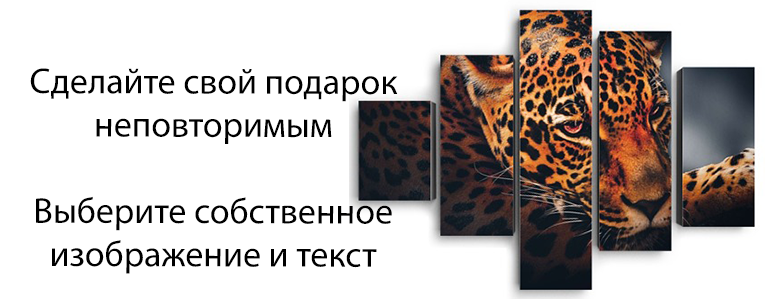
<style>
.page{position:relative;width:765px;height:300px;background:#ffffff}
.page>*{position:absolute;margin:0}
.t1{font:36px "MyriadPro-Regular";color:#000000}
</style>
<div class="page">
<p class="t1" style="left:30px;top:68px;width:368px;height:206px;text-align:center">Сделайте свой подарок<br>неповторимым<br><br>Выберите собственное изображение и текст</p>
</div>
